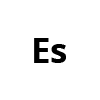
<style>
.page{position:relative;width:100px;height:100px;background:#ffffff}
.page>*{position:absolute;margin:0}
.t1{font:35px "OpenSans-Bold";color:#000000}
</style>
<div class="page">
<p class="t1" style="left:34px;top:38px;width:32px;height:25px">Es</p>
</div>
